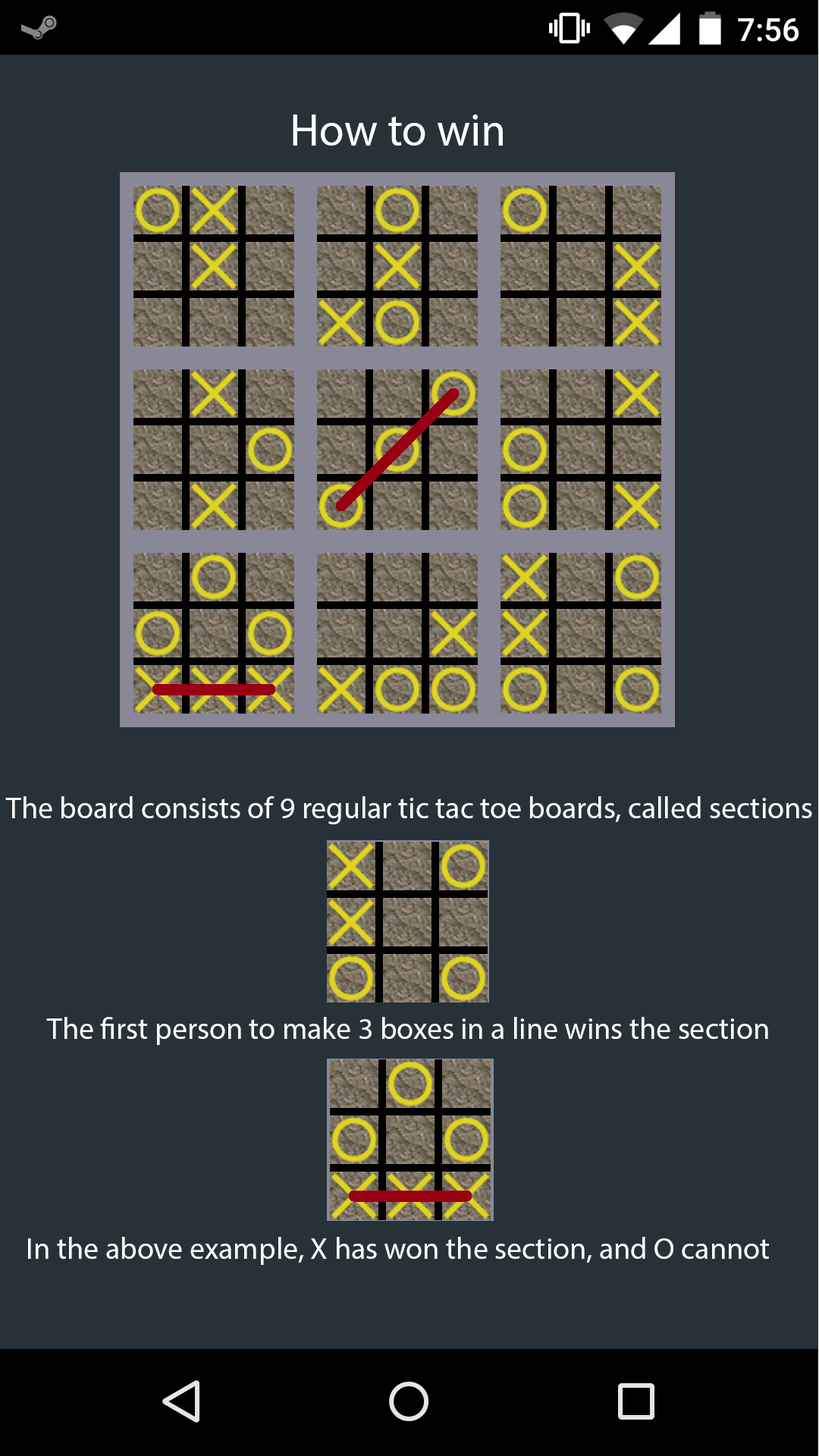
<style>
.page{position:relative;width:819px;height:1456px;background:#263238}
.page>*{position:absolute;margin:0}
.t1{font:45.5px "MyriadPro-Regular";color:#fefefe}
.t2{font:30.3px "MyriadPro-Regular";color:#fefefe}
</style>
<div class="page">
<p class="t1" style="left:293px;top:115px;width:210px;height:31px">How to win</p>
<p class="t2" style="left:5px;top:796px;width:807px;height:28px">The board consists of 9 regular tic tac toe boards, called sections</p>
<p class="t2" style="left:46px;top:1017px;width:722px;height:28px">The first person to make 3 boxes in a line wins the section</p>
<p class="t2" style="left:28px;top:1237px;width:741px;height:28px">In the above example, X has won the section, and O cannot</p>
</div>
